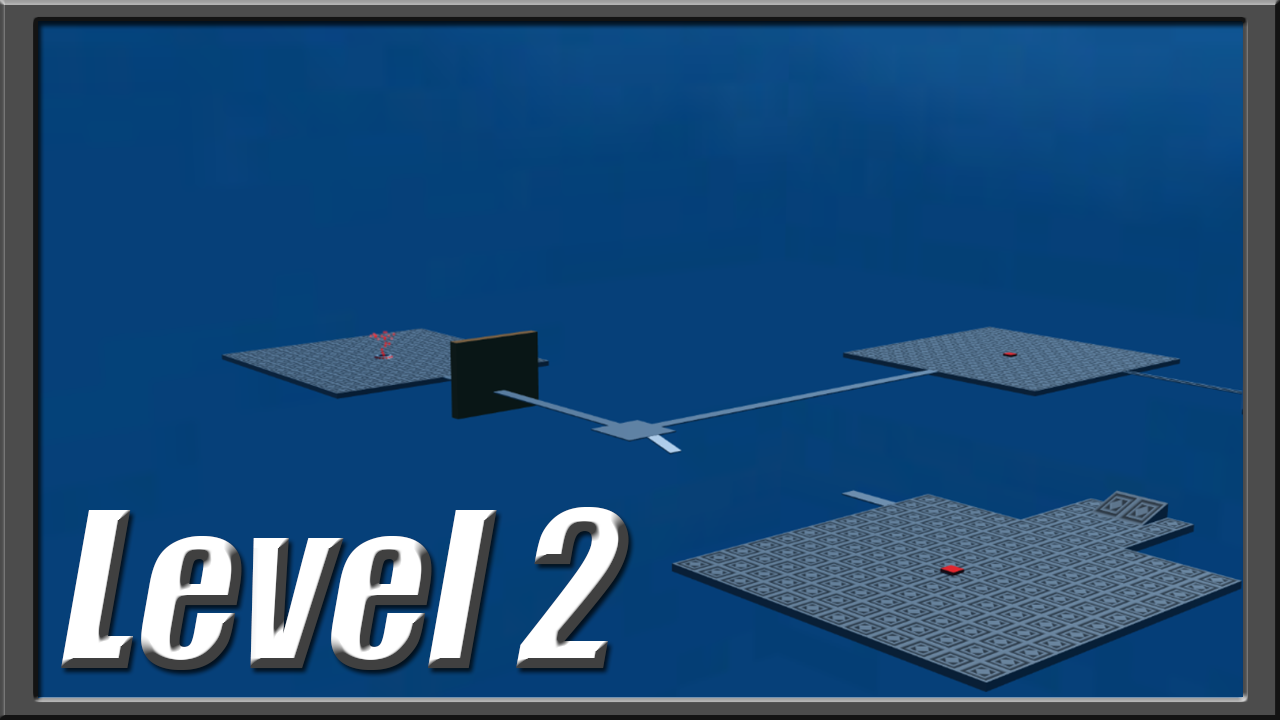
<style>
.page{position:relative;width:1280px;height:720px;background:#064079}
.page>*{position:absolute;margin:0}
.t1{font:200px "Impact";color:#ffffff;font-style:italic}
</style>
<div class="page">
<p class="t1" style="left:61px;top:507px;width:568px;height:163px">Level 2</p>
</div>
